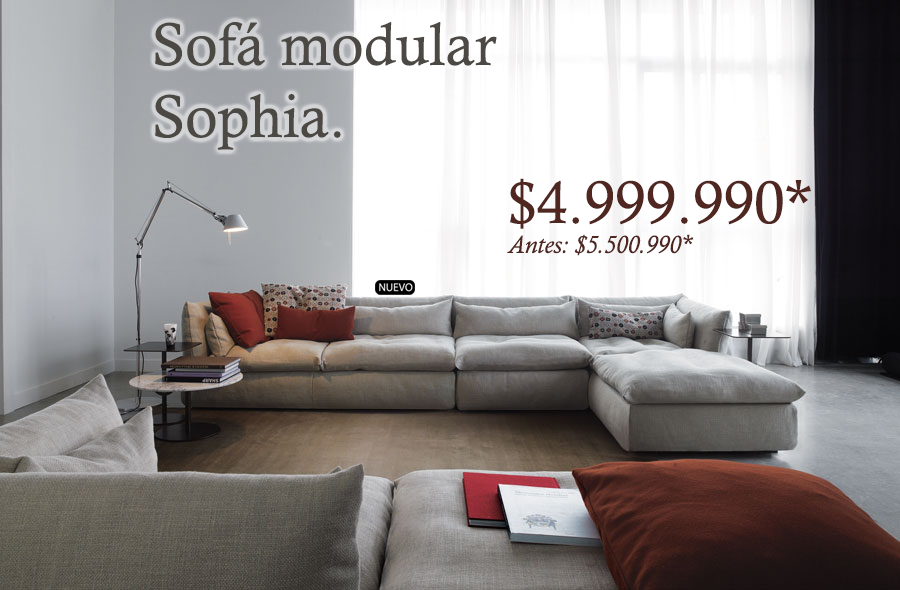
<style>
.page{position:relative;width:900px;height:590px}
.page>*{position:absolute;margin:0}
.t1{font:60px "CalistoMT";color:#4c4944}
.t2{font:25px "CalistoMT-Italic";color:#4f2620}
.t3{font:60px "CalistoMT";color:#4f2620}
</style>
<div class="page">
<p class="t1" style="left:155px;top:22px;width:342px;height:128px">Sofá modular<br>Sophia.</p>
<p class="t2" style="left:507px;top:178px;width:304px;height:78px"><span class="t3">$4.999.990*<br></span>Antes: $5.500.990*</p>
</div>
